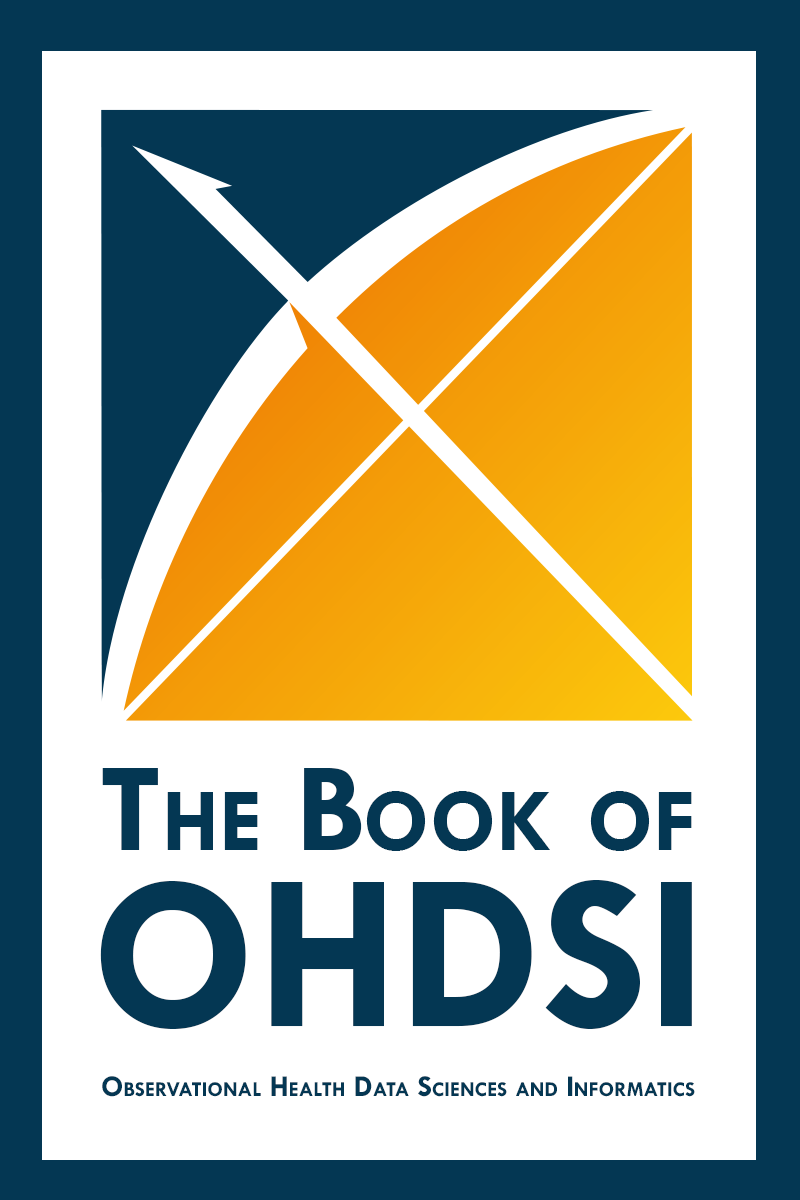
<style>
.page{position:relative;width:800px;height:1200px;background:#ffffff}
.page>*{position:absolute;margin:0}
.t1{font:128px/176px "TwCenMT-Bold";color:#043753;font-variant:small-caps}
.t2{font:224px/176px "TwCenMT-Bold";color:#043753;font-variant:small-caps}
.t3{font:30.4px "TwCenMT-Bold";color:#043753;font-variant:small-caps}
</style>
<div class="page">
<p class="t1" style="left:100px;top:768px;width:592px;height:261px;text-align:center">The Book of<br><span class="t2">OHDSI</span></p>
<p class="t3" style="left:102px;top:1076px;width:593px;height:21px">Observational Health Data Sciences and Informatics</p>
</div>
